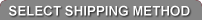
<style>
.page{position:relative;width:202px;height:20px;background:#858585}
.page>*{position:absolute;margin:0}
.t1{font:13.3px "Arial-BoldMT";color:#ffffff}
</style>
<div class="page">
<p class="t1" style="left:9px;top:5px;width:181px;height:11px">SELECT SHIPPING METHOD</p>
</div>
